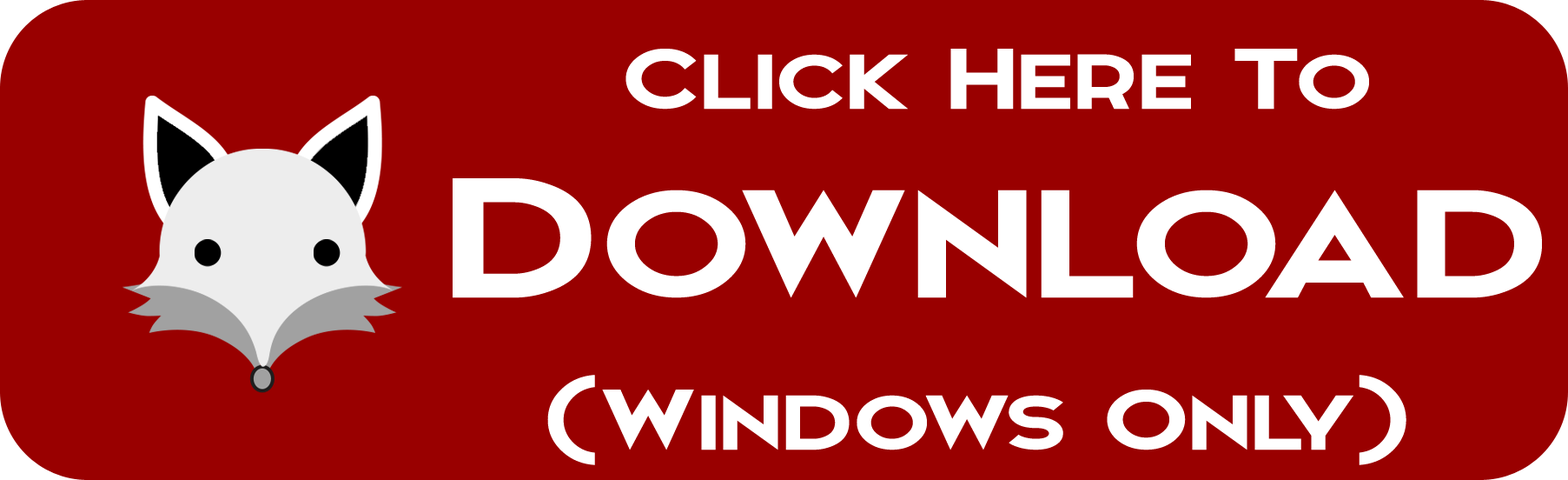
<style>
.page{position:relative;width:1568px;height:480px;background:#990000}
.page>*{position:absolute;margin:0}
.t1{font:115.1px/152px "Elkwood";color:#ffffff;scale:1.29 1}
.t2{font:114.9px/144.8px "Elkwood";color:#ffffff;scale:1.29 1}
.t3{font:227.4px/188.2px "Elkwood";color:#ffffff;scale:1.29 1}
</style>
<div class="page">
<p class="t1" style="left:453px;top:49px;width:1089px;height:416px;text-align:center"><span class="t2">Click Here To<br></span><span class="t3">Download<br></span>(Windows Only)</p>
</div>
